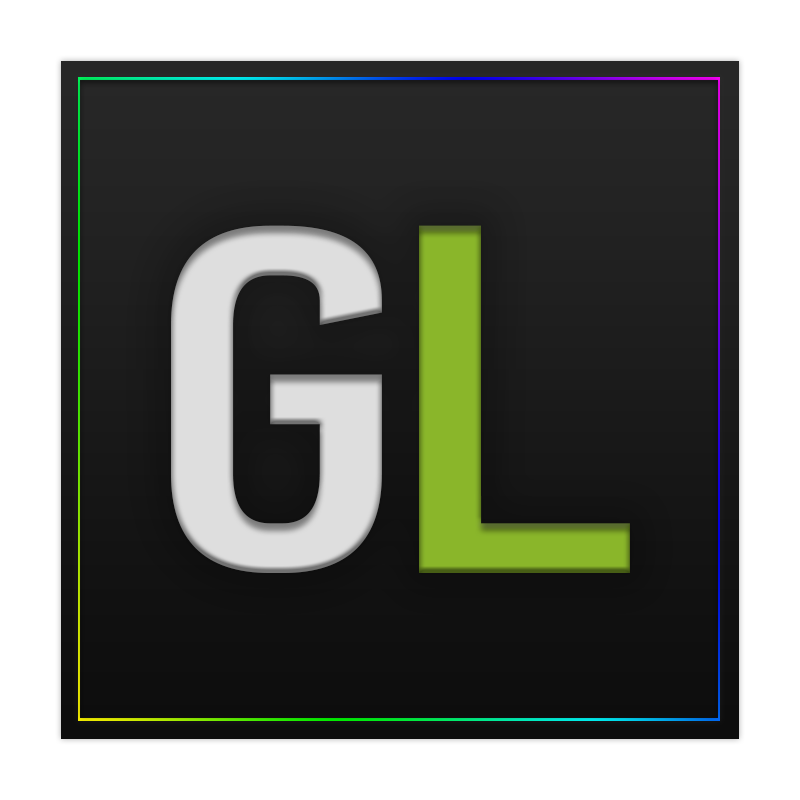
<style>
.page{position:relative;width:800px;height:800px;background:#ffffff}
.page>*{position:absolute;margin:0}
.t1{font:508.3px "Septacharge";color:#dedede}
.t2{font:508.3px "Septacharge";color:#8ab62a}
</style>
<div class="page">
<p class="t1" style="left:171px;top:225px;width:459px;height:348px">G<span class="t2">L</span></p>
</div>
